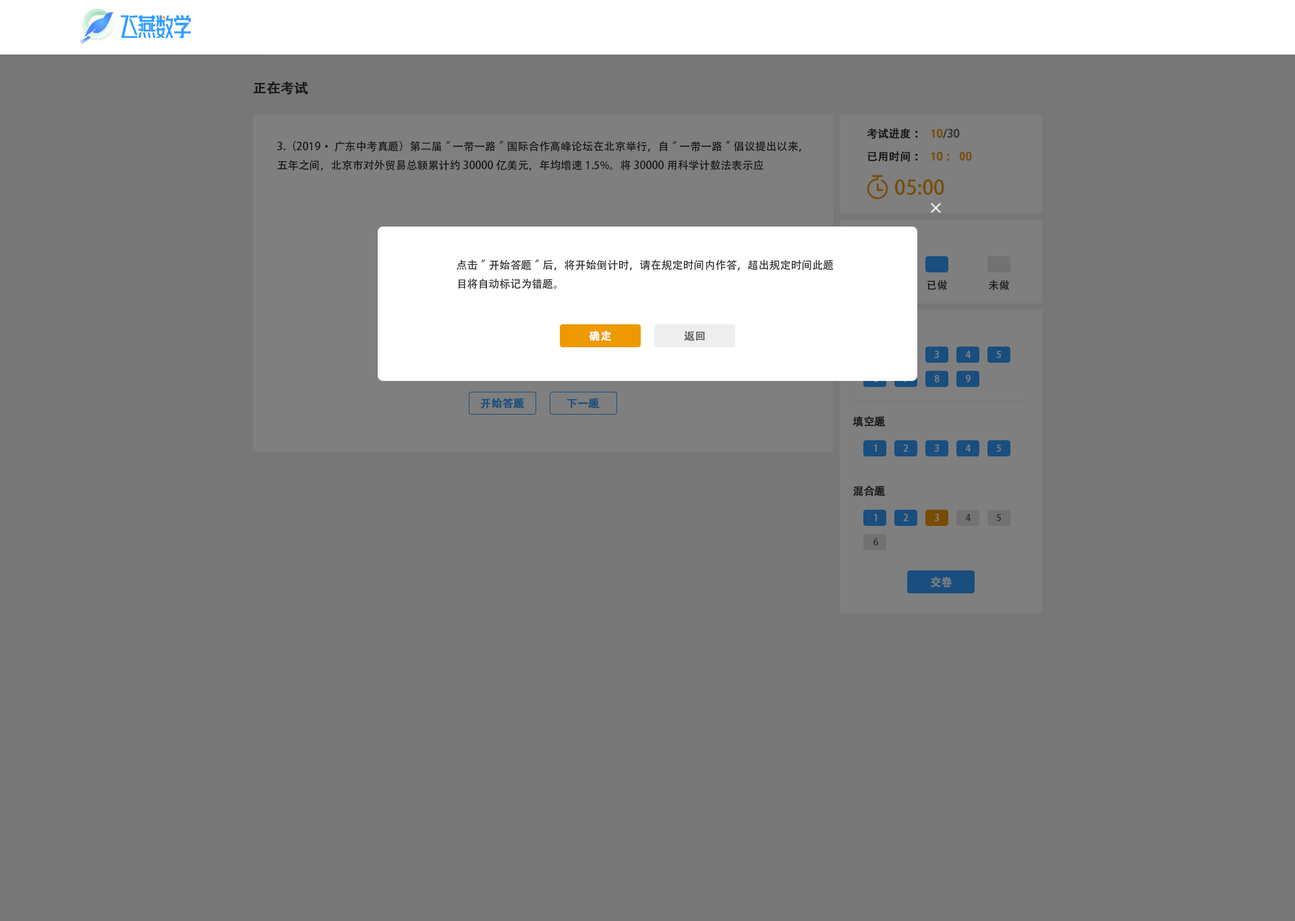
<style>
.page{position:relative;width:1295px;height:921px;background:#777777}
.page>*{position:absolute;margin:0}
.t1{font:13.5px "AdobeHeitiStd-Regular";color:#191919;font-weight:bold}
.t2{font:10.8px "AdobeHeitiStd-Regular";color:#191919;font-weight:bold}
.t3{font:10.8px "AdobeHeitiStd-Regular";font-weight:bold}
.t4{font:10.8px "AdobeHeitiStd-Regular";color:#191919}
.t5{font:10.8px "AdobeHeitiStd-Regular";color:#774c00;font-weight:bold}
.t6{font:20.2px "AdobeHeitiStd-Regular";color:#774c00}
.t7{font:10.8px "AdobeHeitiStd-Regular";color:#333333}
.t8{font:10.8px "AdobeHeitiStd-Regular";color:#ffffff;font-weight:bold}
.t9{font:10.8px "AdobeHeitiStd-Regular";color:#666666;font-weight:bold}
.t10{font:9.4px "AdobeHeitiStd-Regular";color:#7f7f7f}
.t11{font:10.8px "AdobeHeitiStd-Regular";color:#194e7f;font-weight:bold}
.t12{font:9.4px "AdobeHeitiStd-Regular";color:#333333}
.t13{font:10.8px "AdobeHeitiStd-Regular";color:#7f7f7f;font-weight:bold}
</style>
<div class="page">
<p class="t1" style="left:254px;top:81px;width:54px;height:14px">正在考试</p>
<p class="t2" style="left:866px;top:128px;width:52px;height:12px">考试进度：</p>
<p class="t3" style="left:931px;top:129px;width:29px;height:9px">１0/30</p>
<p class="t4" style="left:276px;top:141px;width:525px;height:30px">3.（2019·广东中考真题）第二届“一带一路”国际合作高峰论坛在北京举行，自“一带一路”倡议提出以来，五年之间，北京市对外贸易总额累计约30000亿美元，年均增速1.5%。将30000用科学计数法表示应</p>
<p class="t2" style="left:867px;top:151px;width:51px;height:11px">已用时间：</p>
<p class="t5" style="left:931px;top:152px;width:41px;height:9px">１0：00</p>
<p class="t6" style="left:895px;top:179px;width:49px;height:16px">05:00</p>
<p class="t7" style="left:456px;top:260px;width:377px;height:29px">点击”开始答题”后，将开始倒计时，请在规定时间内作答，超出规定时间此题目将自动标记为错题。</p>
<p class="t4" style="left:927px;top:280px;width:20px;height:11px">已做</p>
<p class="t4" style="left:988px;top:280px;width:21px;height:11px">未做</p>
<p class="t8" style="left:589px;top:330px;width:22px;height:11px">确定</p>
<p class="t9" style="left:684px;top:331px;width:21px;height:10px">返回</p>
<p class="t10" style="left:934px;top:351px;width:5px;height:7px">3</p>
<p class="t10" style="left:965px;top:351px;width:5px;height:7px">4</p>
<p class="t10" style="left:996px;top:351px;width:5px;height:7px">5</p>
<p class="t10" style="left:935px;top:375px;width:4px;height:7px">8</p>
<p class="t10" style="left:966px;top:375px;width:4px;height:7px">9</p>
<p class="t11" style="left:480px;top:398px;width:45px;height:11px">开始答题</p>
<p class="t11" style="left:566px;top:398px;width:33px;height:11px">下一题</p>
<p class="t2" style="left:852px;top:416px;width:33px;height:11px">填空题</p>
<p class="t10" style="left:873px;top:444px;width:4px;height:8px">1</p>
<p class="t10" style="left:903px;top:444px;width:5px;height:8px">2</p>
<p class="t10" style="left:934px;top:444px;width:5px;height:8px">3</p>
<p class="t10" style="left:965px;top:444px;width:5px;height:8px">4</p>
<p class="t10" style="left:996px;top:444px;width:5px;height:8px">5</p>
<p class="t2" style="left:853px;top:485px;width:32px;height:11px">混合题</p>
<p class="t10" style="left:873px;top:514px;width:4px;height:7px">1</p>
<p class="t10" style="left:903px;top:514px;width:5px;height:7px">2</p>
<p class="t10" style="left:934px;top:514px;width:5px;height:7px">3</p>
<p class="t12" style="left:965px;top:514px;width:5px;height:7px">4</p>
<p class="t12" style="left:996px;top:514px;width:5px;height:7px">5</p>
<p class="t12" style="left:873px;top:538px;width:5px;height:7px">6</p>
<p class="t13" style="left:931px;top:577px;width:21px;height:10px">交卷</p>
</div>
